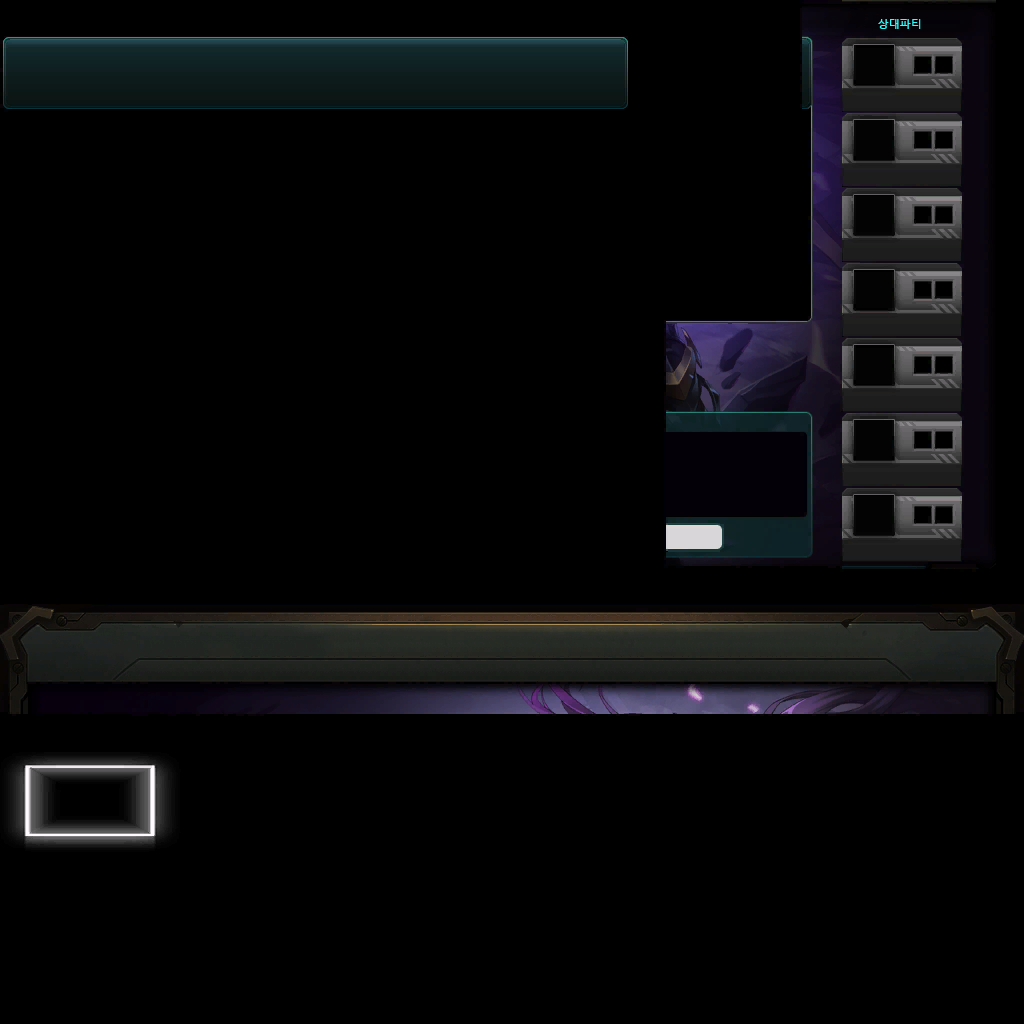
<style>
.page{position:relative;width:1024px;height:1024px;background:#000000}
.page>*{position:absolute;margin:0}
.t1{font:11px "MalgunGothicRegular";color:#31ffff}
</style>
<div class="page">
<p class="t1" style="left:878px;top:19px;width:43px;height:10px">상대파티</p>
</div>
